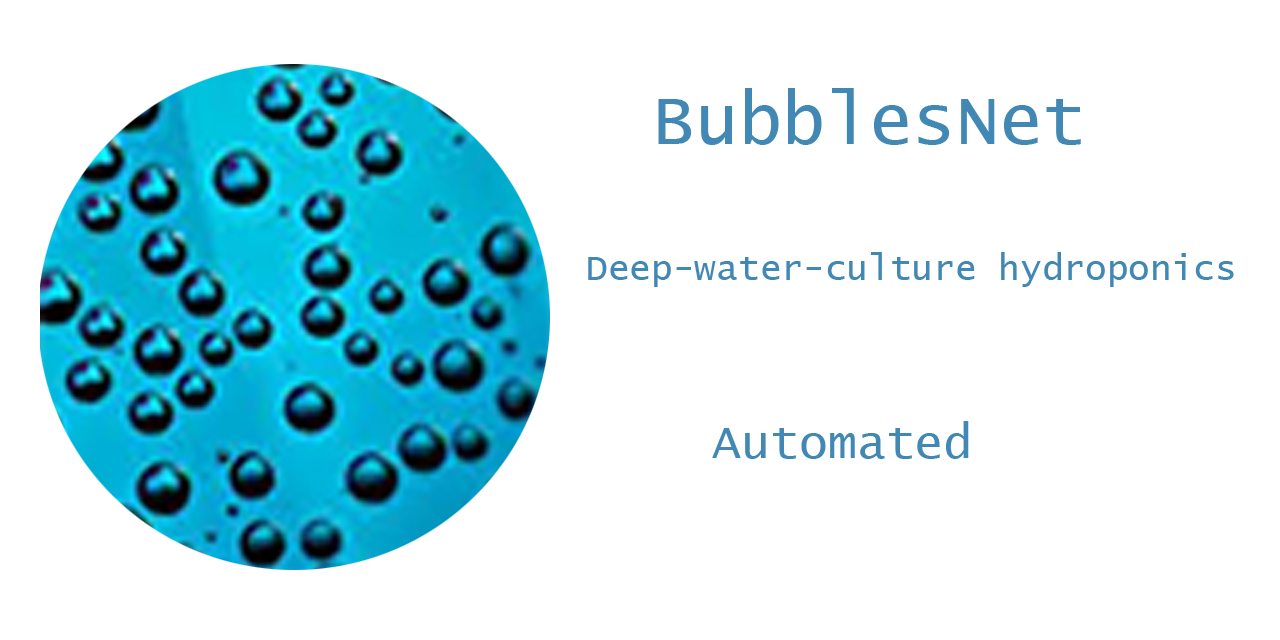
<style>
.page{position:relative;width:1280px;height:640px;background:#ffffff}
.page>*{position:absolute;margin:0}
.t1{font:72px "LucidaConsole";color:#4288b4}
.t2{font:36px "LucidaConsole";color:#4288b4}
.t3{font:48px "LucidaConsole";color:#4288b4}
</style>
<div class="page">
<p class="t1" style="left:658px;top:88px;width:423px;height:57px">BubblesNet</p>
<p class="t2" style="left:588px;top:252px;width:646px;height:35px">Deep-water-culture hydroponics</p>
<p class="t3" style="left:712px;top:421px;width:257px;height:38px">Automated</p>
</div>
